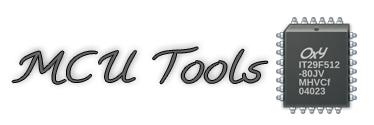
<style>
.page{position:relative;width:374px;height:125px;background:#ffffff}
.page>*{position:absolute;margin:0}
.t1{font:40px "Calligraffiti";color:#676666;scale:1.35 1}
</style>
<div class="page">
<p class="t1" style="left:12px;top:47px;width:256px;height:37px">MCU Tools</p>
</div>
